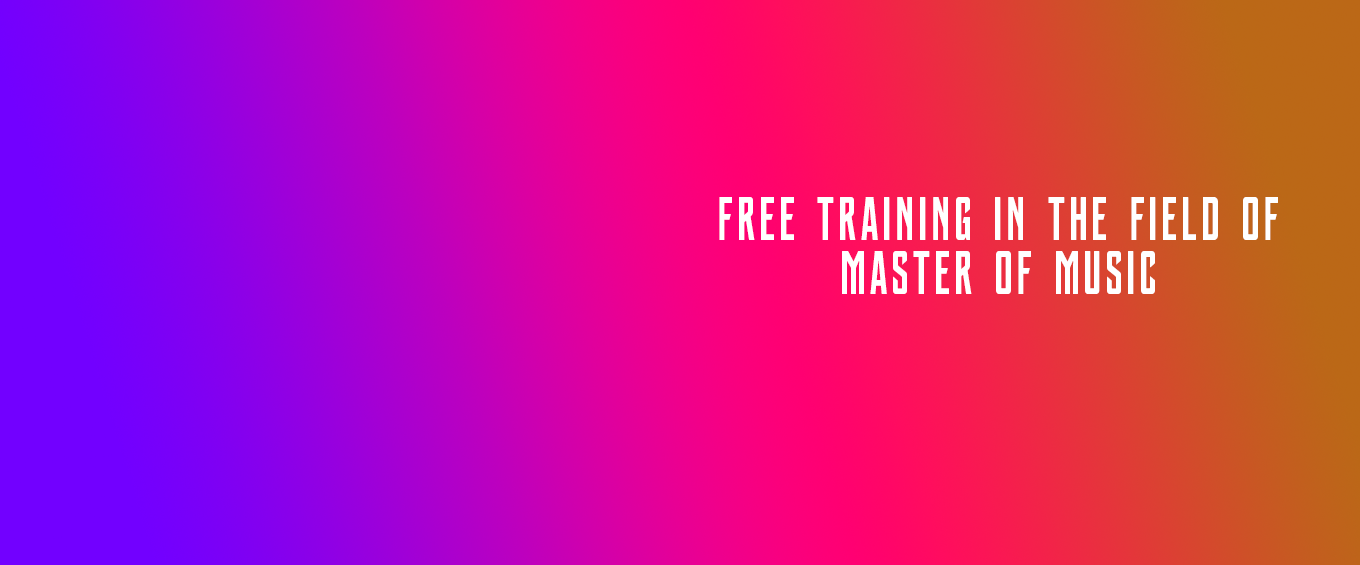
<style>
.page{position:relative;width:1360px;height:565px}
.page>*{position:absolute;margin:0}
.t1{font:61.3px "SVN-JusticeLeague";letter-spacing:0.1em;color:#ffffff;scale:0.84 1}
</style>
<div class="page">
<p class="t1" style="left:719px;top:197px;width:559px;height:97px">Free training in the field of Master of Music</p>
</div>
